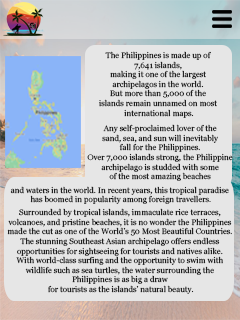
<style>
.page{position:relative;width:240px;height:320px;background:#e6e6e6}
.page>*{position:absolute;margin:0}
.t1{font:8px "Georgia"}
.t2{font:8px "Georgia";color:#000000}
</style>
<div class="page">
<p class="t1" style="left:99px;top:51px;width:118px;height:67px;text-align:center">The Philippines is made up of <br>7,641 islands, <br>making it one of the largest <br>archipelagos in the world. <br>But more than 5,000 of the <br>islands remain unnamed on most <br>international maps.</p>
<p class="t2" style="left:87px;top:124px;width:146px;height:57px;text-align:center">Any self-proclaimed lover of the <br>sand, sea, and sun will inevitably <br>fall for the Philippines. <br>Over 7,000 islands strong, the Philippine <br>archipelago is studded with some <br>of the most amazing beaches</p>
<p class="t2" style="left:10px;top:186px;width:219px;height:18px;text-align:center">and waters in the world. In recent years, this tropical paradise<br> has boomed in popularity among foreign travellers.</p>
<p class="t2" style="left:7px;top:208px;width:225px;height:86px;text-align:center">Surrounded by tropical islands, immaculate rice terraces, <br>volcanoes, and pristine beaches, it is no wonder the Philippines <br>made the cut as one of the World’s 50 Most Beautiful Countries. <br>The stunning Southeast Asian archipelago offers endless <br>opportunities for sightseeing for tourists and natives alike. <br>With world-class surfing and the opportunity to swim with <br>wildlife such as sea turtles, the water surrounding the <br>Philippines is as big a draw <br>for tourists as the islands’ natural beauty.</p>
</div>
